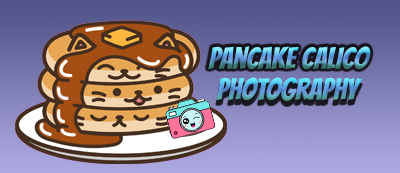
<style>
.page{position:relative;width:400px;height:173px}
.page>*{position:absolute;margin:0}
.t1{font:30px "Bangers-Regular"}
</style>
<div class="page">
<p class="t1" style="left:208px;top:46px;width:163px;height:23px">Pancake Calico</p>
<p class="t1" style="left:216px;top:77px;width:146px;height:24px">Photography</p>
</div>
